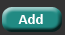
<style>
.page{position:relative;width:65px;height:35px;background:#333333}
.page>*{position:absolute;margin:0}
.t1{font:15px "Calibri-Bold";color:#ffffff}
</style>
<div class="page">
<p class="t1" style="left:18px;top:14px;width:25px;height:10px">Add</p>
</div>
